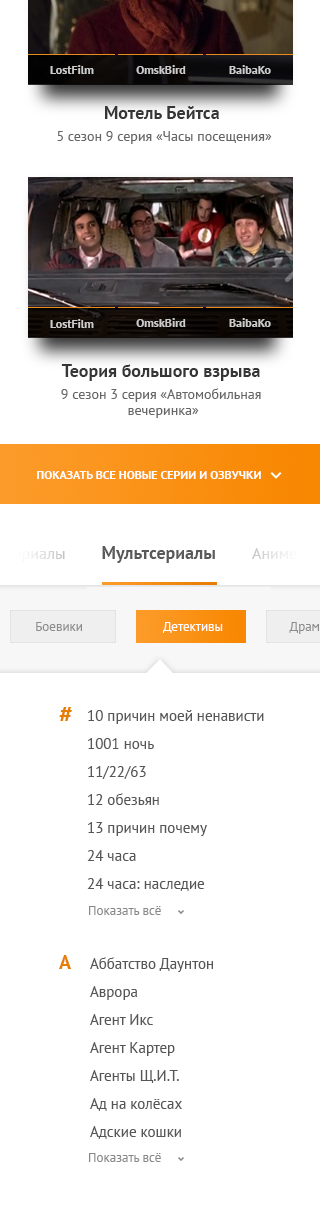
<style>
.page{position:relative;width:320px;height:1229px;background:#ffffff}
.page>*{position:absolute;margin:0}
.t1{font:12px "PTSans-Bold";color:#cccccc}
.t2{font:14px/22px "PTSans-Regular";color:#666666}
.t3{font:18px/22px "PTSans-Bold";color:#363636}
.t4{font:12px "PTSans-Bold";color:#cdcccc}
.t5{font:14px/22px "PTSans-Regular";color:#363636}
.t6{font:14px/16px "PTSans-Regular";color:#666666}
.t7{font:12px "PTSans-Bold";color:#fffefe;text-transform:uppercase}
.t8{font:13px "PTSans-Regular";color:#808080}
.t9{font:13px "PTSans-Regular";color:#ffffff}
.t10{font:24px "PTSans-Bold";color:#e67e02}
.t11{font:15px/28px "PTSans-Regular";color:#575656}
.t12{font:13px "PTSans-Regular";color:#888888}
.t13{font:20px "PTSans-Bold";color:#e67e02}
</style>
<div class="page">
<p class="t1" style="left:50px;top:65px;width:44px;height:9px">LostFilm</p>
<p class="t1" style="left:136px;top:65px;width:50px;height:9px">OmskBird</p>
<p class="t1" style="left:229px;top:65px;width:42px;height:9px">BaibaKo</p>
<p class="t2" style="left:57px;top:106px;width:215px;height:38px;text-align:center"><span class="t3">Мотель Бейтса <br></span>5 сезон 9 серия «Часы посещения»</p>
<p class="t4" style="left:136px;top:318px;width:50px;height:9px">OmskBird</p>
<p class="t1" style="left:229px;top:318px;width:42px;height:9px">BaibaKo</p>
<p class="t4" style="left:50px;top:319px;width:44px;height:9px">LostFilm</p>
<p class="t2" style="left:61px;top:364px;width:200px;height:54px;text-align:center"><span class="t3">Теория большого взрыва</span><span class="t5"> <br></span>9 сезон 3 серия «Автомобильная <br><span class="t6">вечеринка»</span></p>
<p class="t7" style="left:37px;top:471px;width:224px;height:8px">Показать все новые серии и озвучки</p>
<p class="t8" style="left:36px;top:622px;width:46px;height:9px;opacity:0.9">Боевики</p>
<p class="t9" style="left:163px;top:622px;width:60px;height:11px">Детективы</p>
<p class="t10" style="left:59px;top:707px;width:13px;height:14px">#</p>
<p class="t11" style="left:87px;top:710px;width:177px;height:181px">10 причин моей ненависти<br>1001 ночь<br>11/22/63<br>12 обезьян<br>13 причин почему<br>24 часа<br>24 часа: наследие</p>
<p class="t12" style="left:89px;top:906px;width:72px;height:9px">Показать всё</p>
<p class="t13" style="left:59px;top:955px;width:13px;height:14px">A</p>
<p class="t11" style="left:90px;top:957px;width:123px;height:182px">Аббатство Даунтон<br>Аврора<br>Агент Икс<br>Агент Картер<br>Агенты Щ.И.Т.<br>Ад на колёсах<br>Адские кошки</p>
<p class="t12" style="left:89px;top:1153px;width:72px;height:9px">Показать всё</p>
</div>
